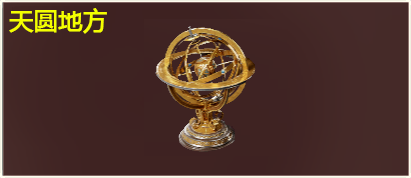
<style>
.page{position:relative;width:411px;height:178px}
.page>*{position:absolute;margin:0}
.t1{font:24px "MicrosoftYaHeiUI";color:#f4ff00;font-weight:bold}
</style>
<div class="page">
<p class="t1" style="left:9px;top:8px;width:98px;height:26px">天圆地方</p>
</div>
